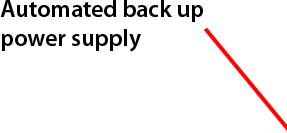
<style>
.page{position:relative;width:287px;height:133px;background:#ffffff}
.page>*{position:absolute;margin:0}
.t1{font:24px "MyriadPro-Semibold";color:#000000}
</style>
<div class="page">
<p class="t1" style="left:0px;top:0px;width:203px;height:52px">Automated back up<br>power supply</p>
</div>
